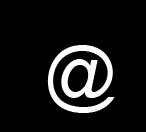
<style>
.page{position:relative;width:146px;height:132px;background:#000000}
.page>*{position:absolute;margin:0}
.t1{font:72px "ArialMT";letter-spacing:0.005em;color:#ffffff}
</style>
<div class="page">
<p class="t1" style="left:47px;top:45px;width:68px;height:68px">@</p>
</div>
